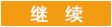
<style>
.page{position:relative;width:112px;height:27px;background:#f39c12}
.page>*{position:absolute;margin:0}
.t1{font:17px "MicrosoftYaHei";letter-spacing:1.02em;color:#ffffff;font-weight:bold}
</style>
<div class="page">
<p class="t1" style="left:30px;top:5px;width:53px;height:18px">继续</p>
</div>
